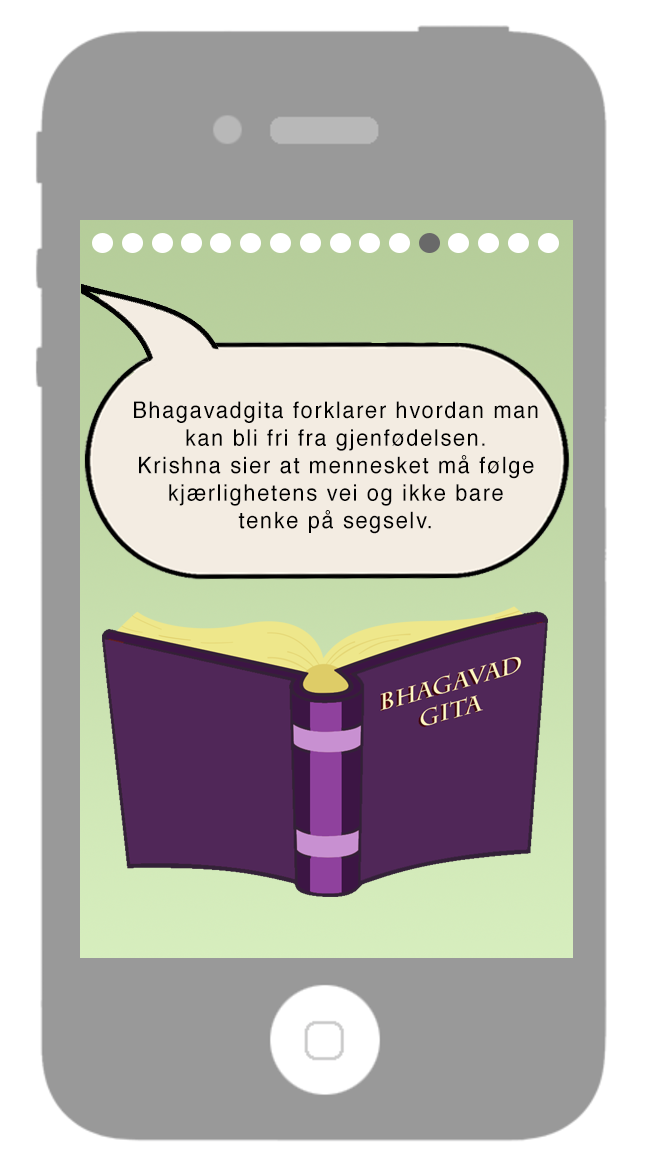
<style>
.page{position:relative;width:646px;height:1172px;background:#999999}
.page>*{position:absolute;margin:0}
.t1{font:11px "Helvetica";letter-spacing:0.075em;color:#010101;scale:0.95 1}
</style>
<div class="page">
<p class="t1" style="left:134px;top:401px;width:404px;height:133px;text-align:center">Bhagavadgita forklarer hvordan man<br>kan bli fri fra gjenfødelsen.<br>Krishna sier at mennesket må følge<br>kjærlighetens vei og ikke bare<br>tenke på segselv.</p>
</div>
